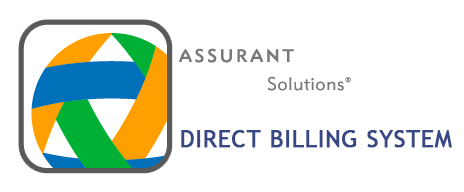
<style>
.page{position:relative;width:464px;height:192px;background:#ffffff}
.page>*{position:absolute;margin:0}
.t1{font:24px "TrebuchetMS";letter-spacing:0.01em;color:#384884;font-weight:bold}
</style>
<div class="page">
<p class="t1" style="left:181px;top:130px;width:271px;height:18px">DIRECT BILLING SYSTEM</p>
</div>
